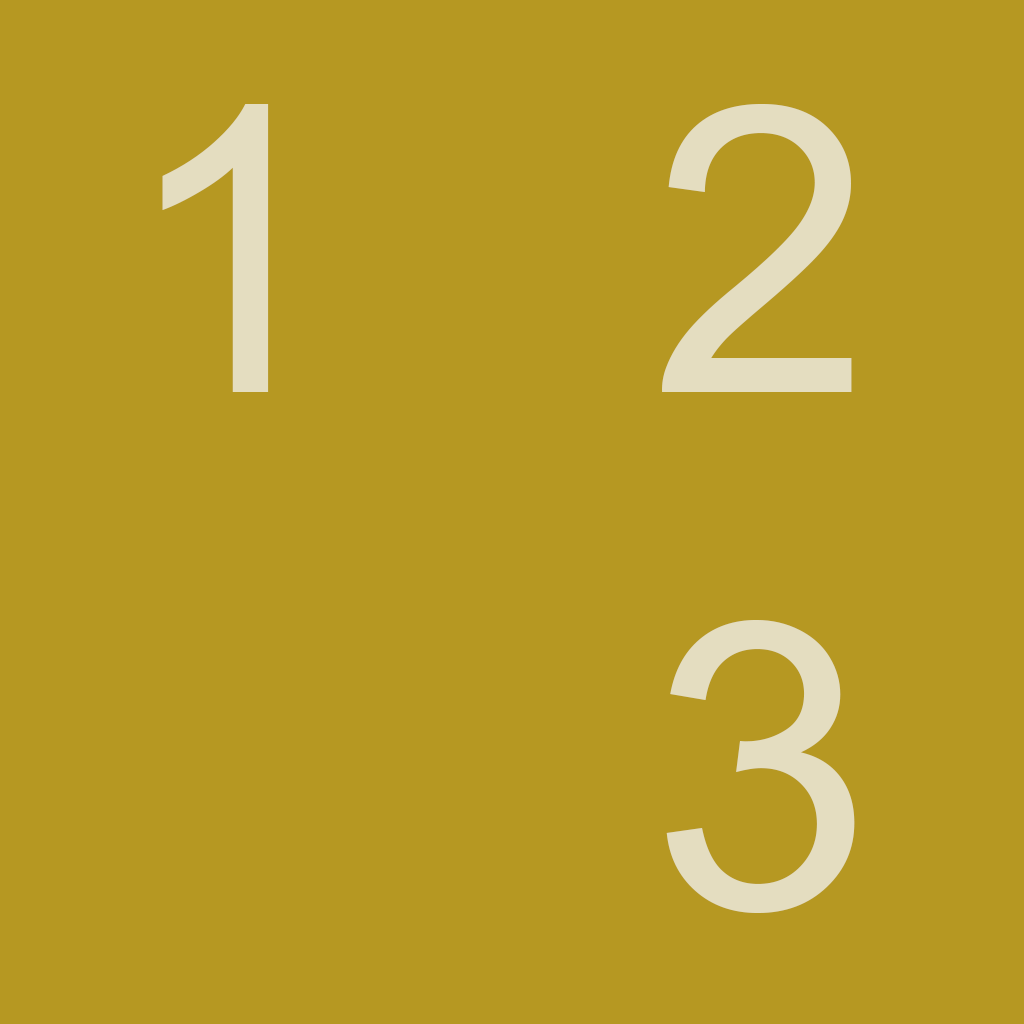
<style>
.page{position:relative;width:1024px;height:1024px;background:#b69822}
.page>*{position:absolute;margin:0}
.t1{font:400px "ArialMT";color:#e4ddc0}
</style>
<div class="page">
<p class="t1" style="left:162px;top:104px;width:107px;height:288px">1</p>
<p class="t1" style="left:162px;top:104px;width:107px;height:288px">1</p>
<p class="t1" style="left:662px;top:104px;width:190px;height:288px">2</p>
<p class="t1" style="left:662px;top:104px;width:190px;height:288px">2</p>
<p class="t1" style="left:666px;top:620px;width:189px;height:293px">3</p>
<p class="t1" style="left:666px;top:620px;width:189px;height:293px">3</p>
</div>
